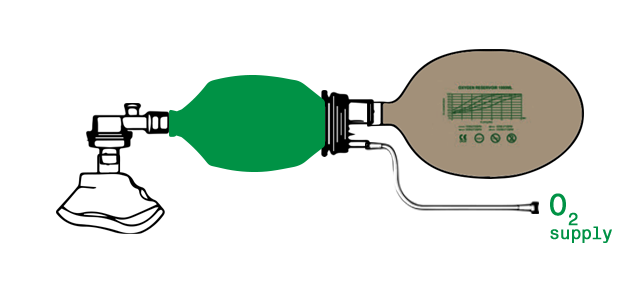
<style>
.page{position:relative;width:640px;height:300px;background:#ffffff}
.page>*{position:absolute;margin:0}
.t1{font:30px/14px "Monospace821BT-Roman";letter-spacing:-0.025em;color:#009245;font-weight:bold}
.t2{font:30px/14px "Monospace821BT-Roman";color:#009245;font-weight:bold}
</style>
<div class="page">
<p class="t1" style="left:550px;top:193px;width:62px;height:50px"><span class="t2">O2<br></span>supply</p>
</div>
